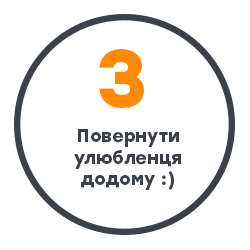
<style>
.page{position:relative;width:250px;height:250px;background:#ffffff}
.page>*{position:absolute;margin:0}
.t1{font:82.1px "Stolzl-Bold";color:#ff8a00}
.t2{font:18px "Stolzl-Bold";color:#3c4148}
</style>
<div class="page">
<p class="t1" style="left:99px;top:49px;width:45px;height:59px">3</p>
<p class="t2" style="left:74px;top:129px;width:107px;height:61px;text-align:center">Повернути<br>улюбленця<br>додому :)</p>
</div>
